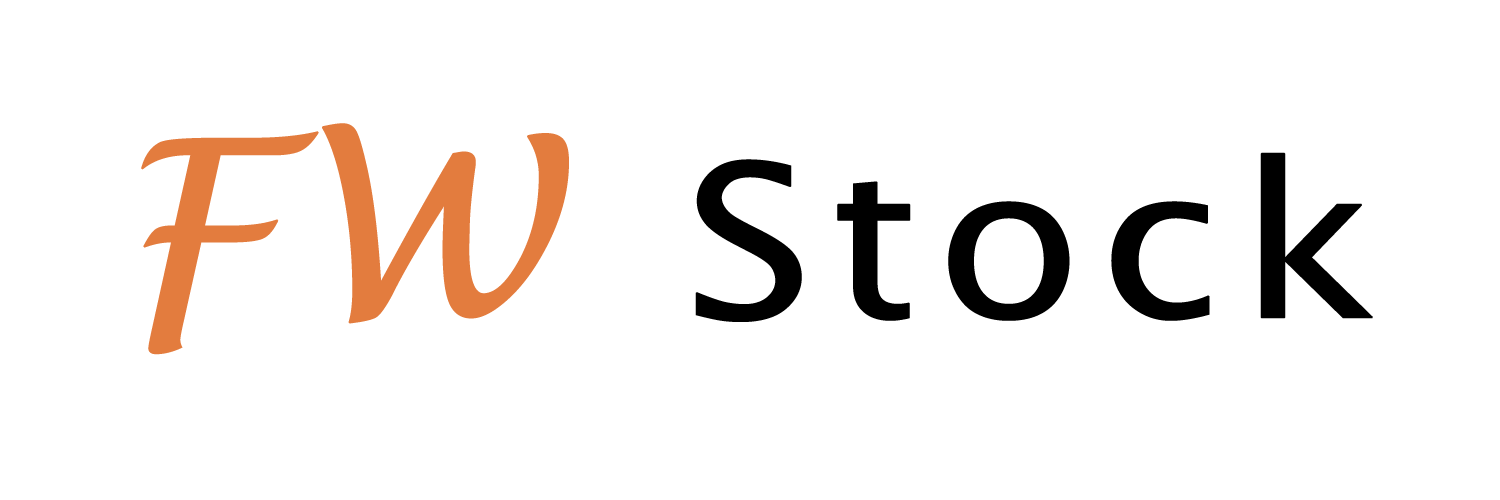
<style>
.page{position:relative;width:1500px;height:500px;background:#ffffff}
.page>*{position:absolute;margin:0}
.t1{font:212.4px "LucidaSans";letter-spacing:0.05em;color:#000000;font-weight:bold;scale:1.11 1}
.t2{font:247.5px "LucidaHandwriting-Italic";letter-spacing:0.05em;color:#e37c3e;font-weight:bold;scale:1.11 1}
</style>
<div class="page">
<p class="t1" style="left:141px;top:123px;width:1232px;height:232px"><span class="t2">FW </span>Stock</p>
</div>
